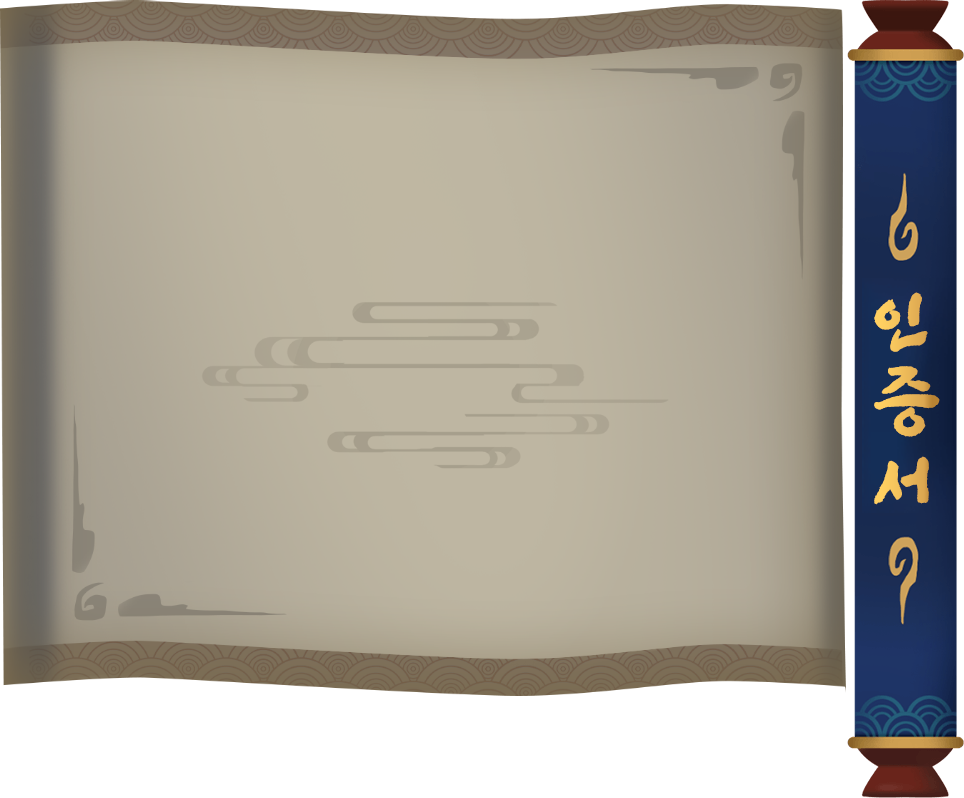
<style>
.page{position:relative;width:964px;height:798px}
.page>*{position:absolute;margin:0}
.t1{font:73.6px/79.2px "SangSangRock";letter-spacing:0.06em;color:#ecb958;font-weight:bold}
</style>
<div class="page">
<p class="t1" style="left:874px;top:292px;width:66px;height:213px">인<br>증<br>서</p>
</div>
